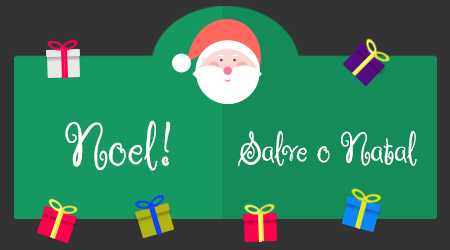
<style>
.page{position:relative;width:450px;height:250px;background:#333333}
.page>*{position:absolute;margin:0}
.t1{font:60px "RugeBoogie-Regular";color:#ffffff}
.t2{font:42px "RugeBoogie-Regular";color:#ffffff}
</style>
<div class="page">
<p class="t1" style="left:65px;top:120px;width:106px;height:51px">Noel!</p>
<p class="t2" style="left:238px;top:130px;width:179px;height:37px">Salve o Natal</p>
</div>
